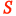
<style>
.page{position:relative;width:16px;height:16px;background:#ffffff}
.page>*{position:absolute;margin:0}
.t1{font:18.7px "FangSong_GB2312";color:#ff1e00;text-transform:uppercase;font-weight:bold;font-style:italic}
</style>
<div class="page">
<p class="t1" style="left:3px;top:0px;width:10px;height:14px">S</p>
</div>
